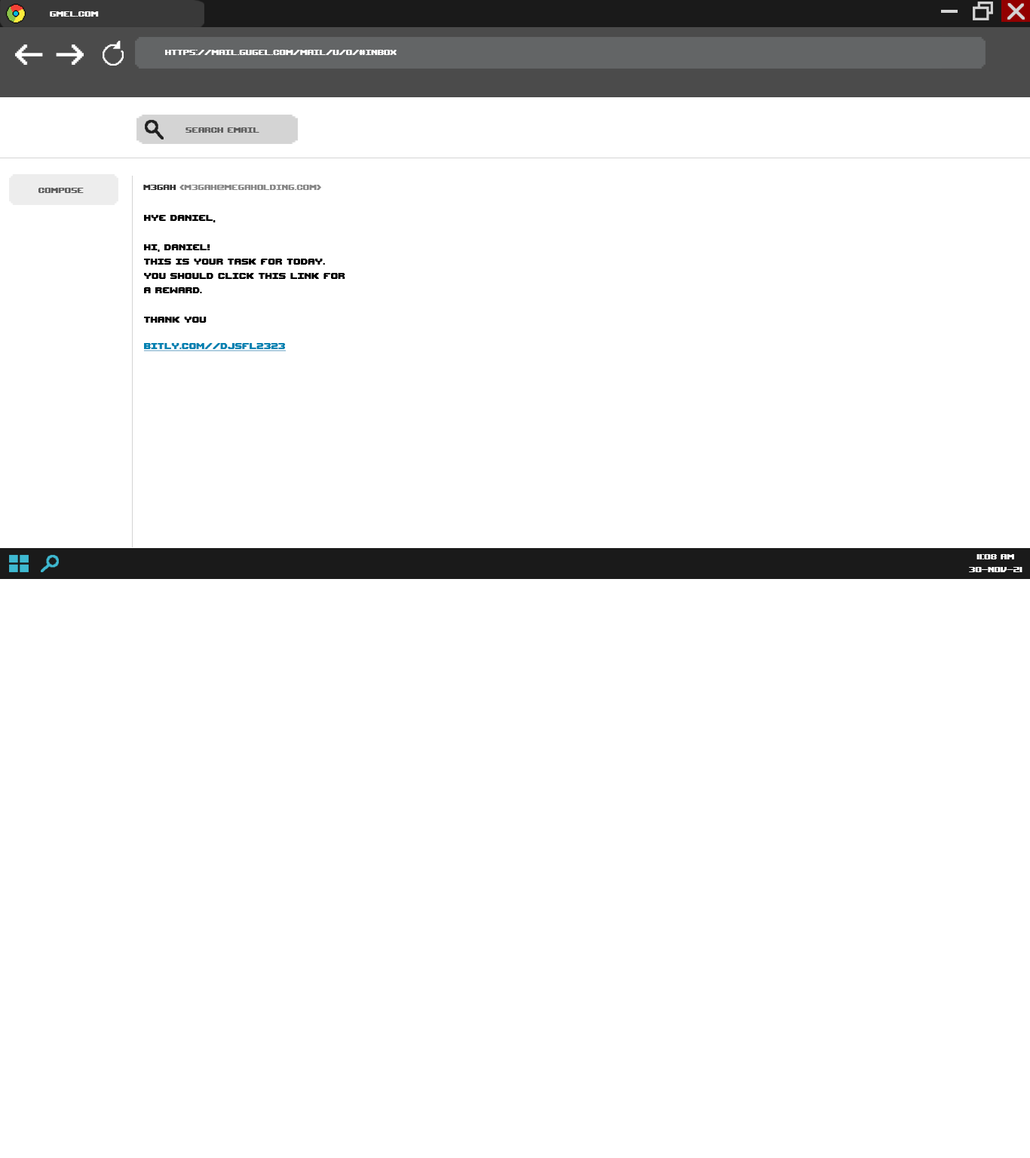
<style>
.page{position:relative;width:1030px;height:1158px;background:#ffffff}
.page>*{position:absolute;margin:0}
.t1{font:10.6px "UpheavalTT-BRK-";color:#ffffff}
.t2{font:10.6px "UpheavalTT-BRK-";color:#5e5e5e}
.t3{font:10.6px "UpheavalTT-BRK-";color:#323232}
.t4{font:10.6px "UpheavalTT-BRK-";color:#878787}
.t5{font:12.1px "UpheavalTT-BRK-";color:#000000}
.t6{font:12.1px "UpheavalTT-BRK-";color:#0081b1;text-decoration:underline}
</style>
<div class="page">
<p class="t1" style="left:50px;top:11px;width:49px;height:6px">gmel.com</p>
<p class="t1" style="left:165px;top:50px;width:232px;height:5px">https://mail.gugel.com/mail/u/0/#inbox</p>
<p class="t2" style="left:185px;top:127px;width:74px;height:6px">search email</p>
<p class="t3" style="left:143px;top:185px;width:33px;height:5px">m3gah</p>
<p class="t4" style="left:179px;top:185px;width:142px;height:5px">&lt;m3gah@megaholding.com&gt;</p>
<p class="t2" style="left:38px;top:188px;width:46px;height:5px">compose</p>
<p class="t5" style="left:144px;top:215px;width:201px;height:108px">hye daniel,<br><br>Hi, Daniel! <br>this is your task for today. <br>You should click this link for<br>a reward.<br><br>thank you</p>
<p class="t6" style="left:143px;top:343px;width:143px;height:8px">bitly.com//djsfl2323</p>
<p class="t1" style="left:969px;top:554px;width:53px;height:18px;text-align:center">11:08 am<br>30-nov-21</p>
</div>
